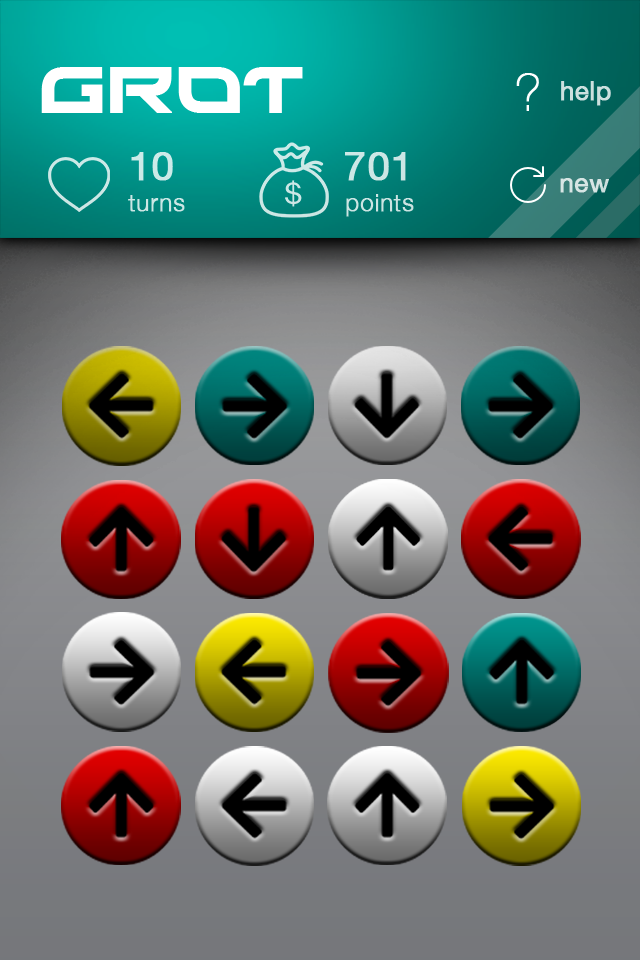
<style>
.page{position:relative;width:640px;height:960px}
.page>*{position:absolute;margin:0}
.t1{font:64px "Xirod-Regular";color:#ffffff;font-weight:bold}
.t2{font:50px "HelveticaNeue-UltraLight";color:#ffffff;font-weight:bold}
.t3{font:26px "HelveticaNeue";color:#cce0de;font-weight:bold}
.t4{font:40px "HelveticaNeue";color:#cceae8;font-weight:bold}
.t5{font:40px "HelveticaNeue";color:#cce7e5;font-weight:bold}
.t6{font:26px "HelveticaNeue";color:#d7e5e4;font-weight:bold}
.t7{font:24px "HelveticaNeue-Light";color:#cce7e5;font-weight:bold}
.t8{font:24px "HelveticaNeue-Light";color:#cce4e2;font-weight:bold}
</style>
<div class="page">
<p class="t1" style="left:41px;top:67px;width:262px;height:46px">GROT</p>
<p class="t2" style="left:516px;top:73px;width:23px;height:38px">?</p>
<p class="t3" style="left:561px;top:81px;width:50px;height:25px">help</p>
<p class="t4" style="left:131px;top:152px;width:42px;height:29px">10</p>
<p class="t5" style="left:345px;top:152px;width:61px;height:29px">701</p>
<p class="t6" style="left:560px;top:178px;width:49px;height:15px">new</p>
<p class="t7" style="left:128px;top:195px;width:57px;height:17px">turns</p>
<p class="t8" style="left:346px;top:194px;width:68px;height:23px">points</p>
</div>
